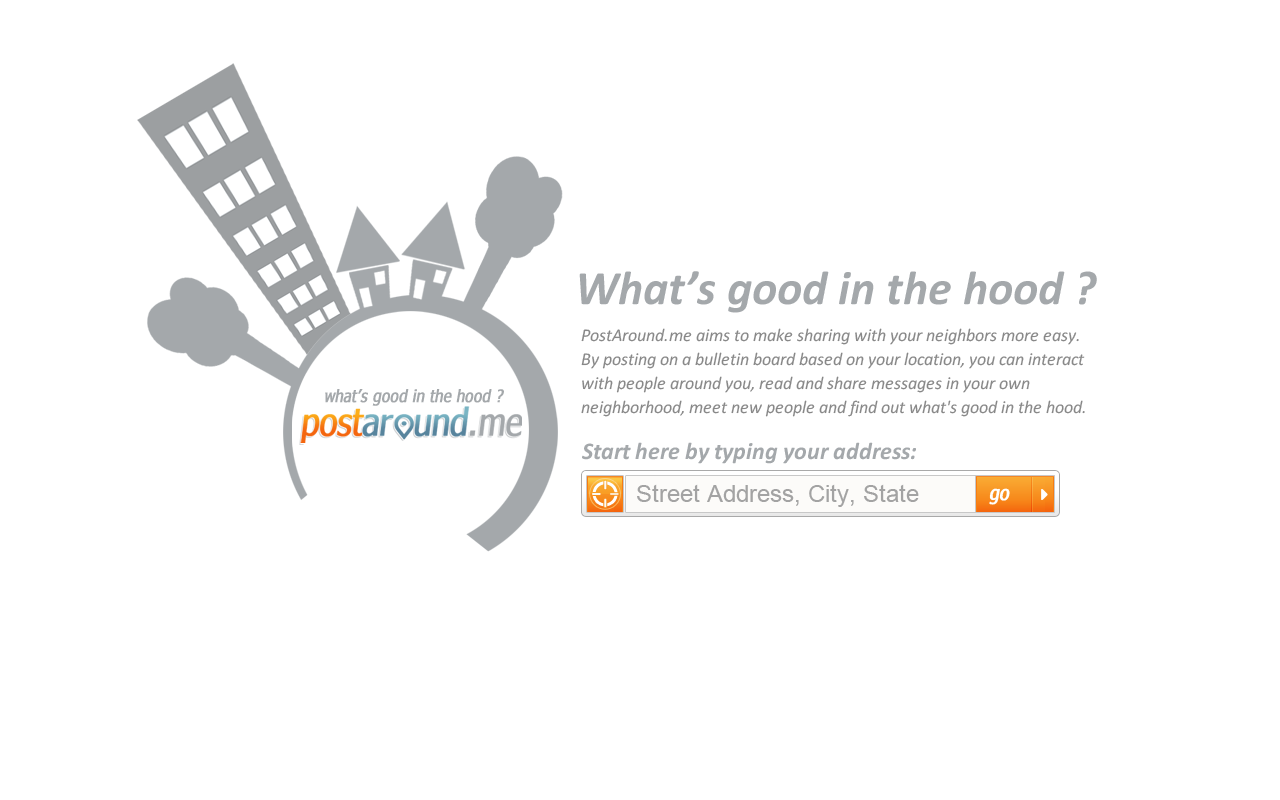
<style>
.page{position:relative;width:1280px;height:800px;background:#ffffff}
.page>*{position:absolute;margin:0}
.t1{font:48px "Calibri-BoldItalic";color:#a4a8ab}
.t2{font:18px/24px "Calibri-Italic";color:#888888}
.t3{font:17.2px "Nina";color:#a4a8ab;font-weight:bold;font-style:italic}
.t4{font:24px "Calibri-BoldItalic";color:#a4a8ab}
.t5{font:24px "ArialMT";color:#a3a3a3}
</style>
<div class="page">
<p class="t1" style="left:579px;top:271px;width:518px;height:42px">What’s good in the hood ?</p>
<p class="t2" style="left:581px;top:328px;width:504px;height:89px">PostAround.me aims to make sharing with your neighbors more easy. <br>By posting on a bulletin board based on your location, you can interact<br>with people around you, read and share messages in your own<br>neighborhood, meet new people and find out what's good in the hood.</p>
<p class="t3" style="left:325px;top:389px;width:179px;height:17px">what’s good in the hood ?</p>
<p class="t4" style="left:582px;top:442px;width:334px;height:22px">Start here by typing your address:</p>
<p class="t5" style="left:637px;top:484px;width:282px;height:23px">Street Address, City, State</p>
</div>
